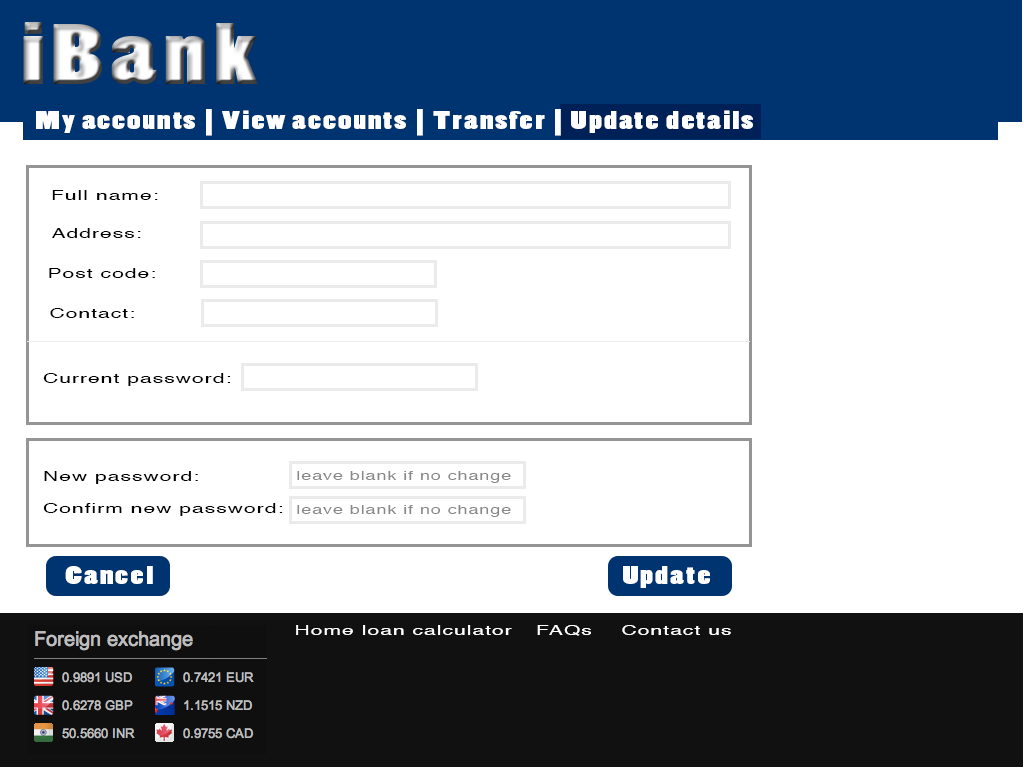
<style>
.page{position:relative;width:1024px;height:768px;background:#ffffff}
.page>*{position:absolute;margin:0}
.t1{font:24px "PoplarStd";letter-spacing:0.05em;color:#ffffff;scale:1.5 1}
.t2{font:14px "Helvetica";letter-spacing:0.05em;color:#000000;scale:1.5 1}
.t3{font:12px "Helvetica";letter-spacing:0.05em;color:#888888;scale:1.5 1}
.t4{font:14px "Helvetica";letter-spacing:0.05em;color:#ffffff;scale:1.5 1}
</style>
<div class="page">
<p class="t1" style="left:36px;top:109px;width:717px;height:27px">My accounts | View accounts | Transfer | Update details</p>
<p class="t2" style="left:52px;top:190px;width:106px;height:10px">Full name:</p>
<p class="t2" style="left:52px;top:228px;width:89px;height:10px">Address:</p>
<p class="t2" style="left:49px;top:268px;width:106px;height:10px">Post code:</p>
<p class="t2" style="left:50px;top:308px;width:84px;height:10px">Contact:</p>
<p class="t2" style="left:43px;top:373px;width:188px;height:13px">Current password:</p>
<p class="t2" style="left:44px;top:471px;width:154px;height:13px">New password:</p>
<p class="t3" style="left:297px;top:471px;width:214px;height:12px">leave blank if no change</p>
<p class="t2" style="left:43px;top:503px;width:240px;height:13px">Confirm new password:</p>
<p class="t3" style="left:297px;top:505px;width:214px;height:12px">leave blank if no change</p>
<p class="t1" style="left:65px;top:566px;width:88px;height:18px">Cancel</p>
<p class="t1" style="left:623px;top:566px;width:87px;height:22px">Update</p>
<p class="t4" style="left:296px;top:625px;width:216px;height:10px">Home loan calculator</p>
<p class="t4" style="left:537px;top:625px;width:54px;height:11px">FAQs</p>
<p class="t4" style="left:622px;top:625px;width:109px;height:10px">Contact us</p>
</div>
